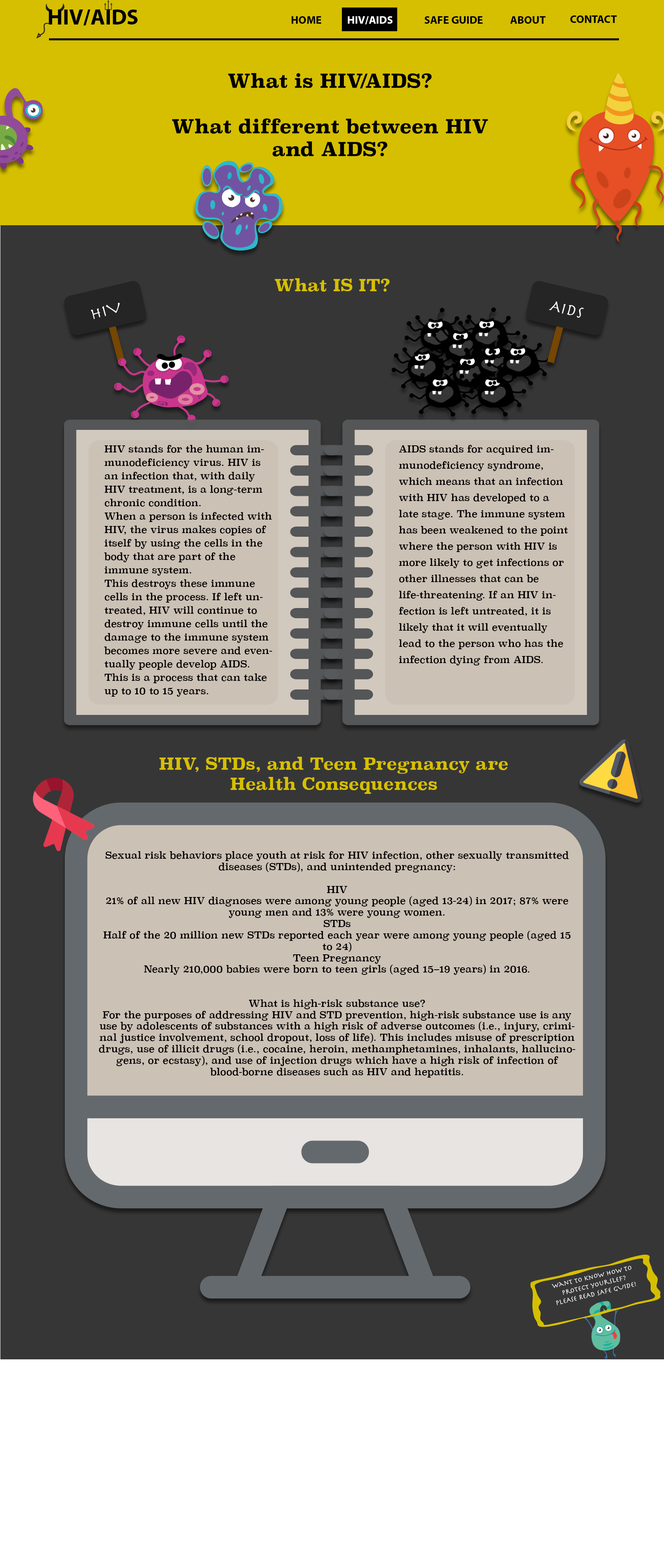
<style>
.page{position:relative;width:664px;height:1568px;background:#363636}
.page>*{position:absolute;margin:0}
.t1{font:22.1px "MyriadPro-Bold";color:#000000}
.t2{font:11.1px "MyriadPro-Bold";color:#000000}
.t3{font:11.1px "MyriadPro-Bold";color:#ffffff}
.t4{font:19px "Superclarendon-Bold";color:#000000}
.t5{font:16.6px "Superclarendon-Bold";color:#d6bf00}
.t6{font:16.6px "Herculanum";color:#ffffff}
.t7{font:9.5px/13.4px "Superclarendon-Regular";color:#000000}
.t8{font:9.5px/16.2px "Superclarendon-Regular";color:#000000}
.t9{font:9.5px "Superclarendon-Regular";color:#000000}
.t10{font:7.1px "Herculanum";color:#ffffff}
</style>
<div class="page">
<p class="t1" style="left:49px;top:9px;width:89px;height:17px">HIV/AIDS</p>
<p class="t2" style="left:291px;top:16px;width:30px;height:8px">HOME</p>
<p class="t3" style="left:348px;top:16px;width:44px;height:8px">HIV/AIDS</p>
<p class="t2" style="left:424px;top:16px;width:58px;height:8px">SAFE GUIDE</p>
<p class="t2" style="left:510px;top:16px;width:36px;height:8px">ABOUT</p>
<p class="t2" style="left:570px;top:15px;width:47px;height:8px">CONTACT</p>
<p class="t4" style="left:172px;top:73px;width:316px;height:83px;text-align:center">What is HIV/AIDS?<br><br>What different between HIV and AIDS?</p>
<p class="t5" style="left:275px;top:278px;width:115px;height:14px">What IS IT?</p>
<p class="t6" style="left:91px;top:303px;width:29px;height:16px;rotate:-15deg">HIV</p>
<p class="t6" style="left:549px;top:302px;width:35px;height:16px;rotate:15deg">AIDS</p>
<p class="t7" style="left:104px;top:445px;width:168px;height:252px;text-align:right">HIV stands for the human immunodeficiency virus. HIV is an infection that, with daily HIV treatment, is a long-term chronic condition.<br>When a person is infected with HIV, the virus makes copies of itself by using the cells in the body that are part of the immune system.<br>This destroys these immune cells in the process. If left untreated, HIV will continue to destroy immune cells until the damage to the immune system becomes more severe and eventually people develop AIDS. This is a process that can take up to 10 to 15 years.</p>
<p class="t8" style="left:399px;top:445px;width:168px;height:220px;text-align:right">AIDS stands for acquired immunodeficiency syndrome, which means that an infection with HIV has developed to a late stage. The immune system has been weakened to the point where the person with HIV is more likely to get infections or other illnesses that can be life-threatening. If an HIV infection is left untreated, it is likely that it will eventually lead to the person who has the infection dying from AIDS.</p>
<p class="t5" style="left:159px;top:757px;width:349px;height:37px;text-align:center">HIV, STDs, and Teen Pregnancy are Health Consequences</p>
<p class="t9" style="left:99px;top:851px;width:476px;height:227px;text-align:center">Sexual risk behaviors place youth at risk for HIV infection, other sexually transmitted diseases (STDs), and unintended pregnancy:<br><br>HIV<br>21% of all new HIV diagnoses were among young people (aged 13-24) in 2017; 87% were young men and 13% were young women. <br>STDs<br>Half of the 20 million new STDs reported each year were among young people (aged 15 to 24) <br>Teen Pregnancy<br>Nearly 210,000 babies were born to teen girls (aged 15–19 years) in 2016. <br><br><br>What is high-risk substance use?<br>For the purposes of addressing HIV and STD prevention, high-risk substance use is any use by adolescents of substances with a high risk of adverse outcomes (i.e., injury, criminal justice involvement, school dropout, loss of life). This includes misuse of prescription drugs, use of illicit drugs (i.e., cocaine, heroin, methamphetamines, inhalants, hallucinogens, or ecstasy), and use of injection drugs which have a high risk of infection of blood-borne diseases such as HIV and hepatitis.</p>
<p class="t10" style="left:552px;top:1266px;width:84px;height:39px;text-align:center;rotate:-13deg">Want to know how to protect yourslef?<br>PLEASE READ SAFE GUIDE!</p>
</div>
